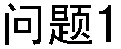
<style>
.page{position:relative;width:121px;height:49px;background:#ffffff}
.page>*{position:absolute;margin:0}
.t1{font:48px "SimHei";color:#000000}
.t2{font:56px "SimHei";color:#000000}
</style>
<div class="page">
<p class="t1" style="left:5px;top:3px;width:87px;height:42px">问题</p>
<p class="t2" style="left:99px;top:5px;width:12px;height:37px">1</p>
</div>
